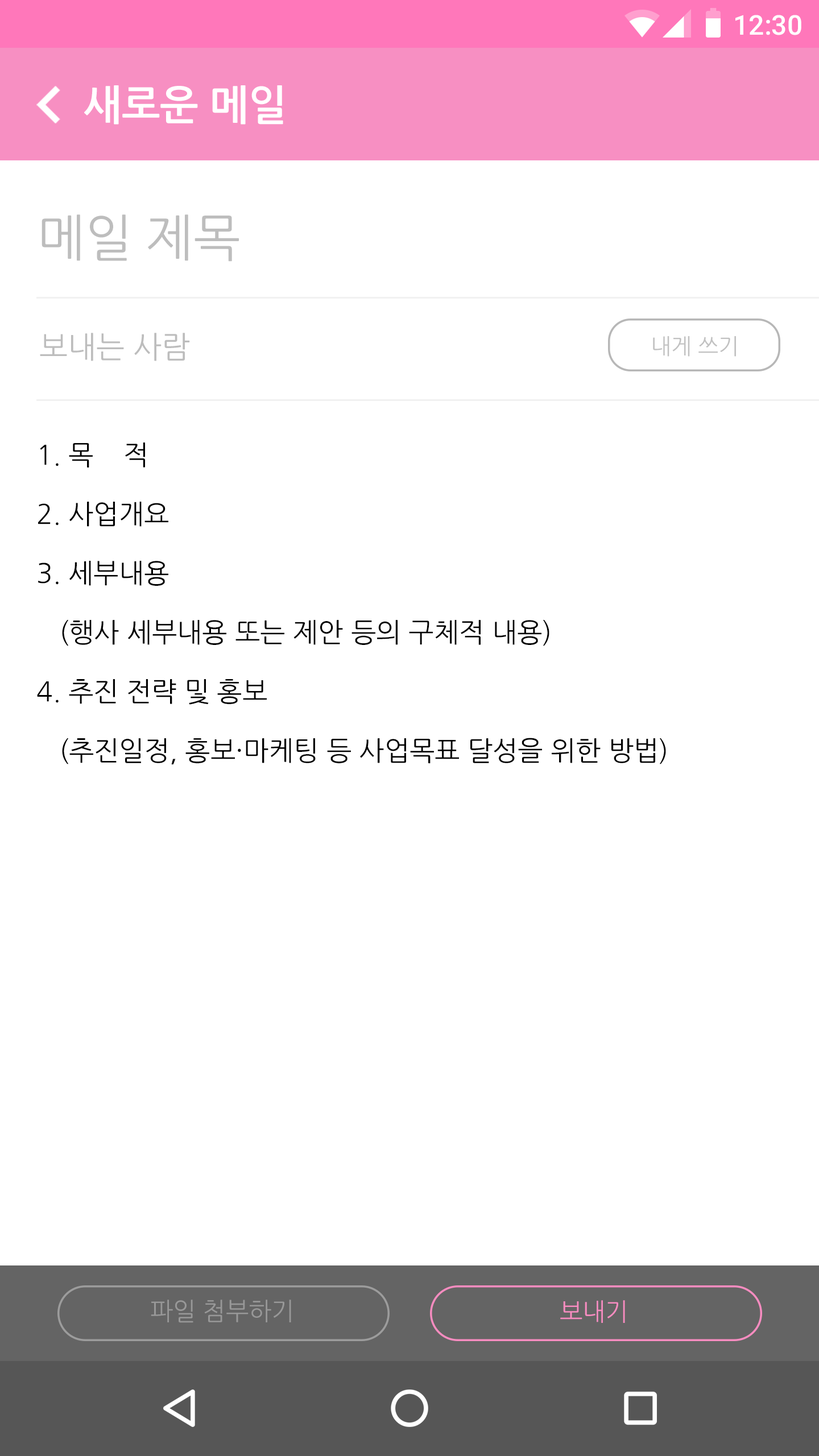
<style>
.page{position:relative;width:819px;height:1456px;background:#ffffff}
.page>*{position:absolute;margin:0}
.t1{font:27.3px "Roboto-Medium";color:#ffffff}
.t2{font:40.9px "NanumGothicBold";color:#ffffff}
.t3{font:50.1px "NanumGothic";color:#bdbdbd}
.t4{font:30.3px "NanumGothic";color:#bdbdbd}
.t5{font:21.9px "NanumGothic";color:#c1c1c1}
.t6{font:26.8px/59.2px "NanumGothic";color:#000000}
.t7{font:24.4px "NanumGothic";color:#989898}
.t8{font:24.4px "NanumGothic";color:#f78cc0}
</style>
<div class="page">
<p class="t1" style="left:735px;top:15px;width:66px;height:20px">12:30</p>
<p class="t2" style="left:84px;top:85px;width:199px;height:40px">새로운 메일</p>
<p class="t3" style="left:42px;top:214px;width:197px;height:48px">메일 제목</p>
<p class="t4" style="left:40px;top:333px;width:150px;height:28px">보내는 사람</p>
<p class="t5" style="left:653px;top:336px;width:83px;height:21px">내게 쓰기</p>
<p class="t6" style="left:37px;top:442px;width:629px;height:322px">1. 목    적<br>2. 사업개요<br>3. 세부내용<br>   (행사 세부내용 또는 제안 등의 구체적 내용)<br>4. 추진 전략 및 홍보<br>   (추진일정, 홍보·마케팅 등 사업목표 달성을 위한 방법)<br><br><br>5. 예산계획안<br>   (사업에 필요한 수입·지출 등 예산계획)</p>
<p class="t7" style="left:151px;top:1300px;width:140px;height:23px">파일 첨부하기</p>
<p class="t8" style="left:560px;top:1300px;width:65px;height:23px">보내기</p>
</div>
